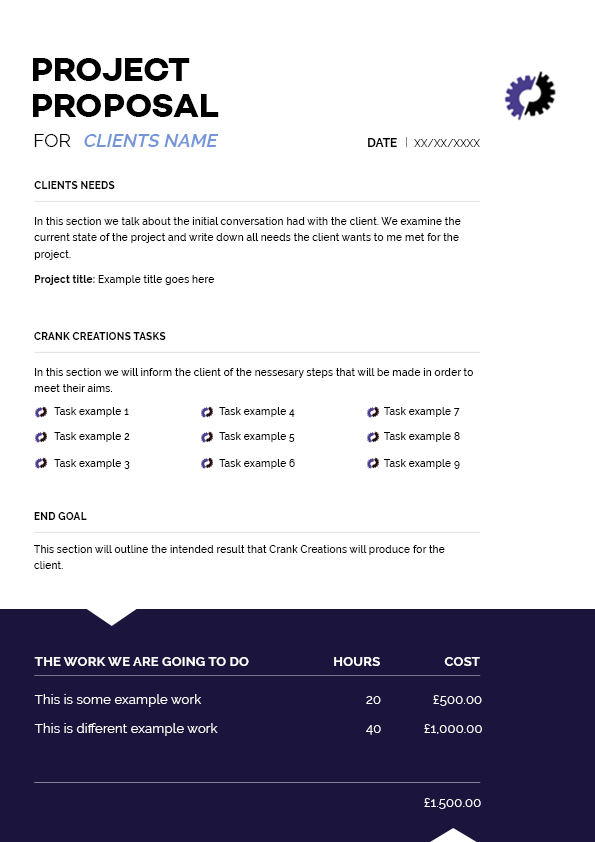
<style>
.page{position:relative;width:595px;height:842px;background:#ffffff}
.page>*{position:absolute;margin:0}
.t1{font:34px/35.8px "Campton-BoldDEMO";color:#000000}
.t2{font:19.1px "Raleway-Regular";color:#000000}
.t3{font:19.1px "Raleway-SemiBoldItalic";color:#7495d7}
.t4{font:12px "Raleway-Bold";color:#000000}
.t5{font:10.5px "Raleway-Regular";color:#000000}
.t6{font:10.5px "Raleway-Bold";color:#000000}
.t7{font:10.5px/16.8px "Raleway-Medium";color:#000000}
.t8{font:10.5px "Raleway-Medium";color:#000000}
.t9{font:13.4px "Raleway-Bold";color:#ffffff}
.t10{font:13.4px "Raleway-Regular";color:#ffffff}
</style>
<div class="page">
<p class="t1" style="left:33px;top:58px;width:186px;height:59px">PROJECT <br>PROPOSAL</p>
<p class="t2" style="left:34px;top:134px;width:37px;height:13px">FOR</p>
<p class="t3" style="left:84px;top:134px;width:135px;height:13px">CLIENTS NAME</p>
<p class="t4" style="left:368px;top:138px;width:29px;height:9px">DATE</p>
<p class="t5" style="left:414px;top:139px;width:66px;height:8px">XX/XX/XXXX</p>
<p class="t6" style="left:34px;top:181px;width:81px;height:8px">CLIENTS NEEDS</p>
<p class="t7" style="left:34px;top:217px;width:427px;height:43px">In this section we talk about the initial conversation had with the client. We examine the current state of the project and write down all needs the client wants to me met for the project.</p>
<p class="t8" style="left:34px;top:275px;width:180px;height:10px"><span class="t6">Project title: </span>Example title goes here</p>
<p class="t6" style="left:34px;top:332px;width:132px;height:8px">CRANK CREATIONS TASKS</p>
<p class="t7" style="left:34px;top:368px;width:439px;height:24px">In this section we will inform the client of the nessesary steps that will be made in order to meet their aims.</p>
<p class="t8" style="left:54px;top:407px;width:406px;height:10px">Task example 1           Task example 4           Task example 7</p>
<p class="t8" style="left:54px;top:432px;width:406px;height:10px">Task example 2           Task example 5           Task example 8</p>
<p class="t8" style="left:54px;top:459px;width:406px;height:10px">Task example 3           Task example 6           Task example 9</p>
<p class="t6" style="left:34px;top:512px;width:53px;height:8px">END GOAL</p>
<p class="t7" style="left:34px;top:545px;width:411px;height:24px">This section will outline the intended result that Crank Creations will produce for the client.</p>
<p class="t9" style="left:34px;top:657px;width:215px;height:9px">THE WORK WE ARE GOING TO DO</p>
<p class="t9" style="left:334px;top:657px;width:46px;height:9px">HOURS</p>
<p class="t9" style="left:444px;top:657px;width:36px;height:9px">COST</p>
<p class="t10" style="left:34px;top:694px;width:168px;height:13px">This is some example work</p>
<p class="t10" style="left:366px;top:696px;width:15px;height:8px">20</p>
<p class="t10" style="left:433px;top:695px;width:49px;height:11px">£500.00</p>
<p class="t10" style="left:34px;top:723px;width:184px;height:13px">This is different example work</p>
<p class="t10" style="left:366px;top:725px;width:15px;height:10px">40</p>
<p class="t10" style="left:424px;top:724px;width:58px;height:10px">£1,000.00</p>
<p class="t10" style="left:424px;top:798px;width:57px;height:11px">£1.500.00</p>
</div>
